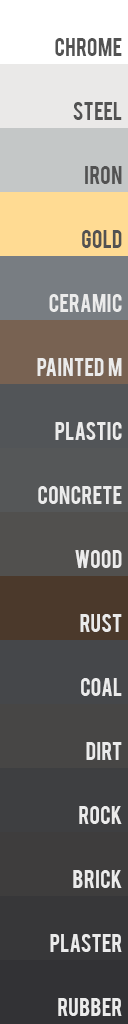
<style>
.page{position:relative;width:128px;height:1024px}
.page>*{position:absolute;margin:0}
.t1{font:20px "Bebas";color:#525252}
.t2{font:20px "Bebas";color:#ebebeb}
</style>
<div class="page">
<p class="t1" style="left:55px;top:38px;width:67px;height:18px">Chrome</p>
<p class="t1" style="left:73px;top:102px;width:49px;height:18px">steel</p>
<p class="t1" style="left:85px;top:166px;width:37px;height:18px">iron</p>
<p class="t1" style="left:82px;top:230px;width:40px;height:18px">gold</p>
<p class="t2" style="left:49px;top:294px;width:73px;height:18px">ceramic</p>
<p class="t2" style="left:37px;top:358px;width:85px;height:18px">painted  m</p>
<p class="t2" style="left:55px;top:422px;width:67px;height:18px">plastic</p>
<p class="t2" style="left:38px;top:486px;width:84px;height:18px">concrete</p>
<p class="t2" style="left:75px;top:550px;width:47px;height:18px">wood</p>
<p class="t2" style="left:80px;top:614px;width:42px;height:18px">rust</p>
<p class="t2" style="left:81px;top:678px;width:41px;height:18px">coal</p>
<p class="t2" style="left:86px;top:742px;width:36px;height:18px">dirt</p>
<p class="t2" style="left:79px;top:806px;width:43px;height:18px">rock</p>
<p class="t2" style="left:73px;top:870px;width:49px;height:18px">brick</p>
<p class="t2" style="left:50px;top:934px;width:72px;height:18px">plaster</p>
<p class="t2" style="left:58px;top:998px;width:64px;height:18px">rubber</p>
</div>
